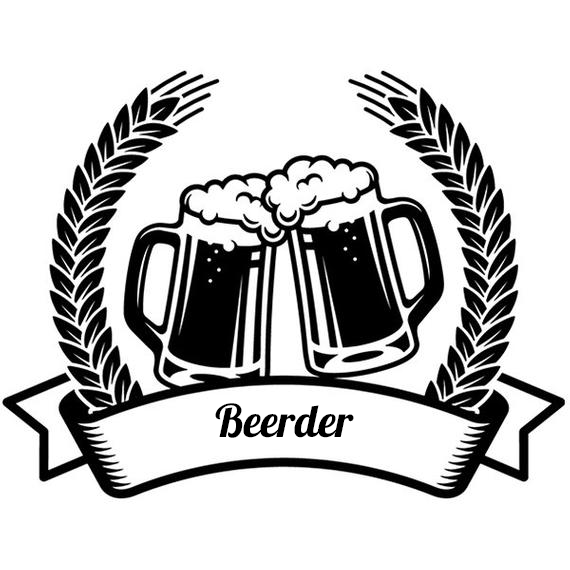
<style>
.page{position:relative;width:570px;height:570px;background:#ffffff}
.page>*{position:absolute;margin:0}
.t1{font:45px "Lobster";color:#000000}
</style>
<div class="page">
<p class="t1" style="left:215px;top:403px;width:139px;height:35px">Beerder</p>
</div>
